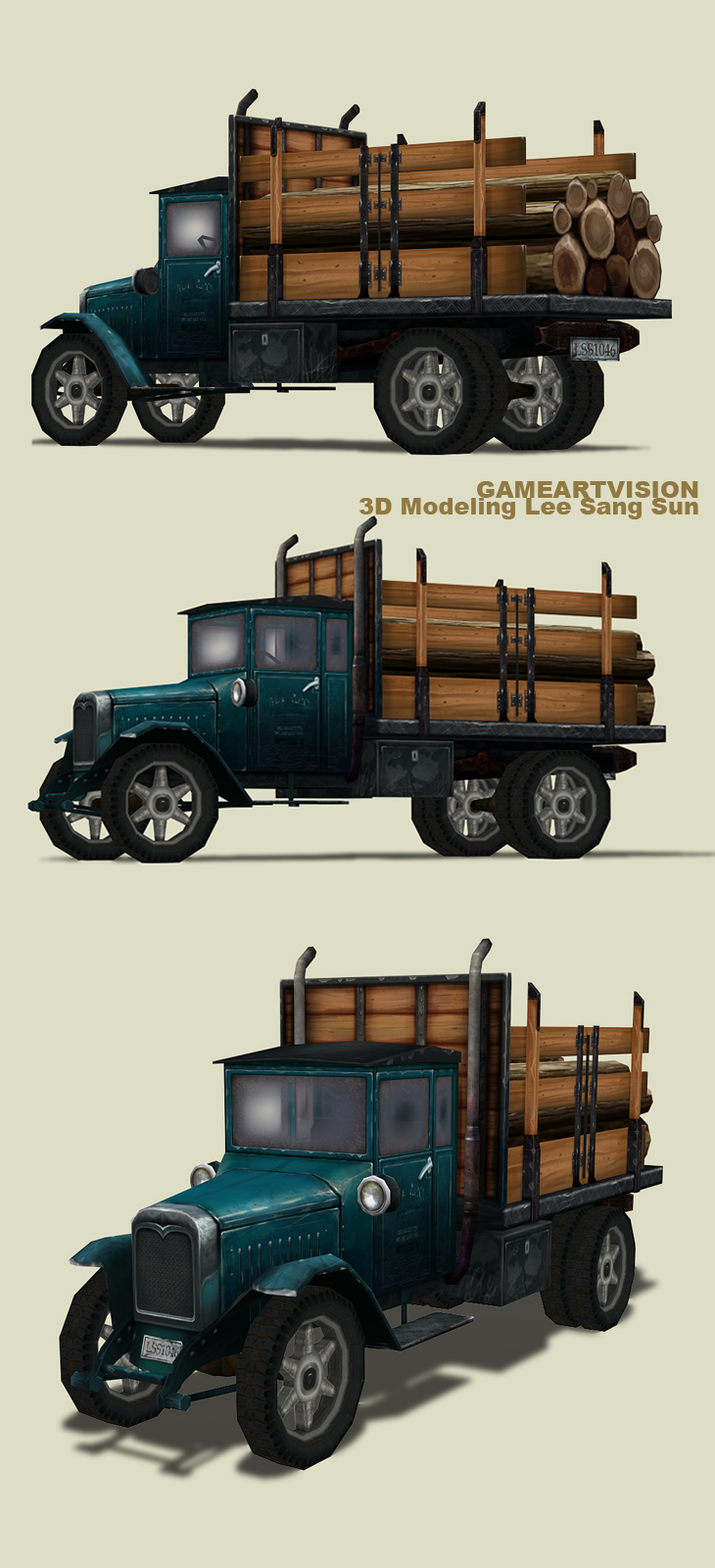
<style>
.page{position:relative;width:715px;height:1568px;background:#deddc5}
.page>*{position:absolute;margin:0}
.t1{font:23.5px "Arial-Black";color:#907942}
</style>
<div class="page">
<p class="t1" style="left:477px;top:481px;width:222px;height:17px">GAMEARTVISION</p>
<p class="t1" style="left:359px;top:498px;width:340px;height:21px">3D Modeling Lee Sang Sun</p>
</div>
